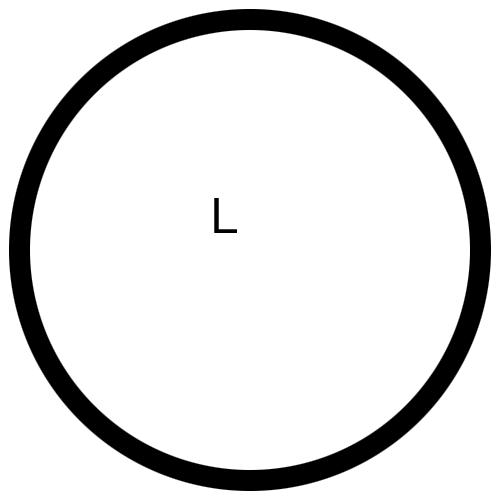
<style>
.page{position:relative;width:500px;height:500px;background:#ffffff}
.page>*{position:absolute;margin:0}
.t1{font:50px "Sansation-Regular";color:#000000}
</style>
<div class="page">
<p class="t1" style="left:214px;top:198px;width:23px;height:35px">L</p>
</div>
